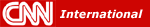
<style>
.page{position:relative;width:150px;height:27px;background:#ce0502}
.page>*{position:absolute;margin:0}
.t1{font:11px "Verdana-BoldItalic";color:#ffffff}
</style>
<div class="page">
<p class="t1" style="left:60px;top:9px;width:83px;height:10px">International</p>
</div>
